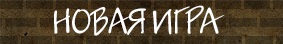
<style>
.page{position:relative;width:283px;height:44px}
.page>*{position:absolute;margin:0}
.t1{font:30px "JakobCTT-Regular";color:#ffffff}
</style>
<div class="page">
<p class="t1" style="left:54px;top:5px;width:171px;height:31px">НОВАЯ ИГРА</p>
</div>
